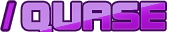
<style>
.page{position:relative;width:182px;height:32px}
.page>*{position:absolute;margin:0}
.t1{font:41.3px "DFSoGeiStd-W9";letter-spacing:-0.03em;font-weight:bold;scale:0.96 1}
</style>
<div class="page">
<p class="t1" style="left:22px;top:2px;width:143px;height:32px">QUASE</p>
</div>
